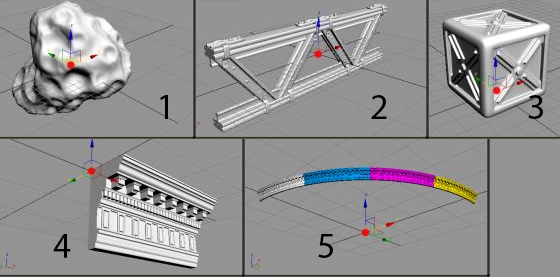
<style>
.page{position:relative;width:560px;height:277px;background:#949494}
.page>*{position:absolute;margin:0}
.t1{font:36px "MyriadHebrew-Regular";color:#000000}
</style>
<div class="page">
<p class="t1" style="left:160px;top:95px;width:8px;height:24px">1</p>
<p class="t1" style="left:371px;top:95px;width:16px;height:24px">2</p>
<p class="t1" style="left:528px;top:95px;width:15px;height:24px">3</p>
<p class="t1" style="left:53px;top:234px;width:18px;height:24px">4</p>
<p class="t1" style="left:318px;top:234px;width:15px;height:24px">5</p>
</div>
